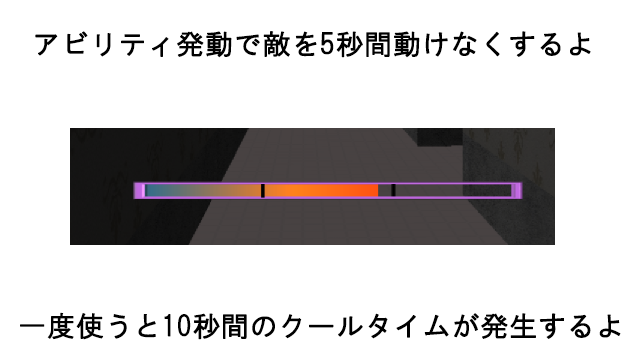
<style>
.page{position:relative;width:640px;height:360px;background:#ffffff}
.page>*{position:absolute;margin:0}
.t1{font:28.1px "HGGothicM";color:#000000;font-weight:bold}
</style>
<div class="page">
<p class="t1" style="left:35px;top:31px;width:556px;height:27px">アビリティ発動で敵を5秒間動けなくするよ</p>
<p class="t1" style="left:20px;top:312px;width:601px;height:28px">一度使うと10秒間のクールタイムが発生するよ</p>
</div>
